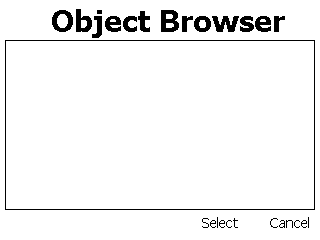
<style>
.page{position:relative;width:320px;height:240px;background:#ffffff}
.page>*{position:absolute;margin:0}
.t1{font:30px "Tahoma-Bold";color:#000000}
.t2{font:14px "Tahoma";color:#000000}
</style>
<div class="page">
<p class="t1" style="left:52px;top:9px;width:233px;height:29px">Object Browser</p>
<p class="t2" style="left:202px;top:217px;width:107px;height:11px">Select        Cancel</p>
</div>
